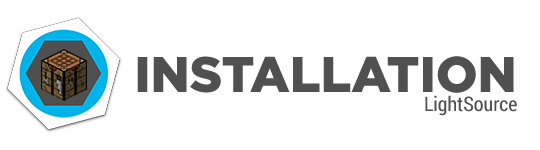
<style>
.page{position:relative;width:540px;height:150px;background:#ffffff}
.page>*{position:absolute;margin:0}
.t1{font:50px "GothamPro-Black";color:#505050}
.t2{font:20px "RobotoCondensed-Regular";color:#505050}
</style>
<div class="page">
<p class="t1" style="left:137px;top:56px;width:377px;height:37px">INSTALLATION</p>
<p class="t2" style="left:425px;top:95px;width:92px;height:21px">LightSource</p>
</div>
